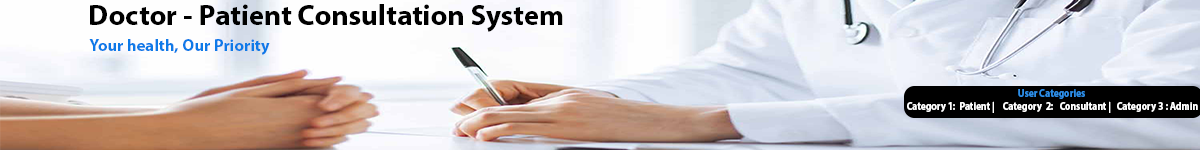
<style>
.page{position:relative;width:1200px;height:150px}
.page>*{position:absolute;margin:0}
.t1{font:29.2px "MyriadPro-Bold";color:#000000}
.t2{font:16.5px "MyriadPro-Bold";color:#0e7ae8}
.t3{font:10.9px "MyriadPro-Bold";color:#2d8de6;scale:0.88 1}
.t4{font:10.9px "MyriadPro-Bold";color:#ffffff;scale:0.88 1}
</style>
<div class="page">
<p class="t1" style="left:90px;top:4px;width:473px;height:28px">Doctor - Patient Consultation System</p>
<p class="t2" style="left:89px;top:39px;width:181px;height:16px">Your health, Our Priority</p>
<p class="t3" style="left:1018px;top:89px;width:67px;height:10px">User Categories</p>
<p class="t4" style="left:907px;top:101px;width:291px;height:12px">Category 1:  Patient |    Category  2:   Consultant |   Category 3 : Admin</p>
</div>
